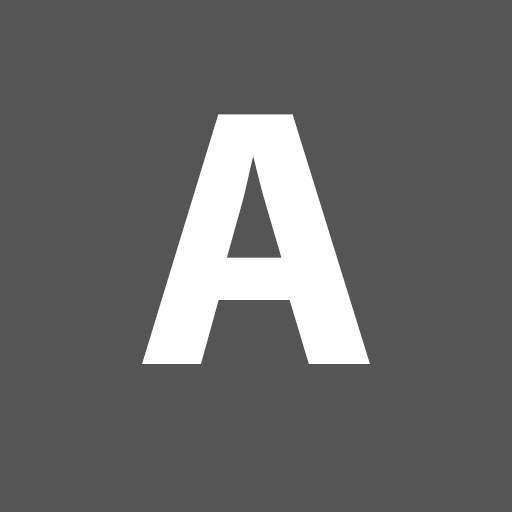
<style>
.page{position:relative;width:512px;height:512px;background:#555555}
.page>*{position:absolute;margin:0}
.t1{font:370px "MyriadPro-Bold";color:#ffffff}
</style>
<div class="page">
<p class="t1" style="left:142px;top:114px;width:228px;height:250px">A</p>
</div>
